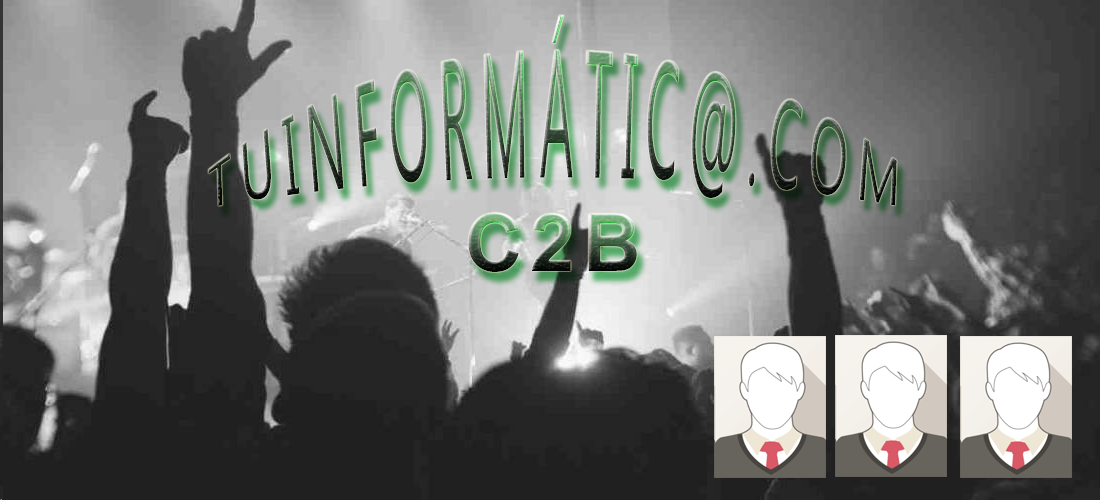
<style>
.page{position:relative;width:1100px;height:500px}
.page>*{position:absolute;margin:0}
.t1{font:48px "MicrosoftJhengHeiUIRegular";letter-spacing:0.2em}
.t2{font:80px "Arial-BoldMT";letter-spacing:0.1em}
</style>
<div class="page">
<p class="t1" style="left:208px;top:15px;width:689px;height:191px">TUINFORMÁTIC@.COM</p>
<p class="t2" style="left:468px;top:212px;width:169px;height:60px">C2B</p>
</div>
